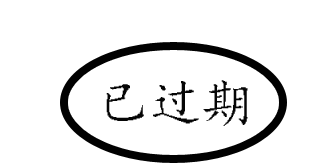
<style>
.page{position:relative;width:335px;height:168px;background:#ffffff}
.page>*{position:absolute;margin:0}
.t1{font:51.3px "¿¬Ìå-Regular";color:#050505}
</style>
<div class="page">
<p class="t1" style="left:106px;top:80px;width:142px;height:46px">已过期</p>
</div>
